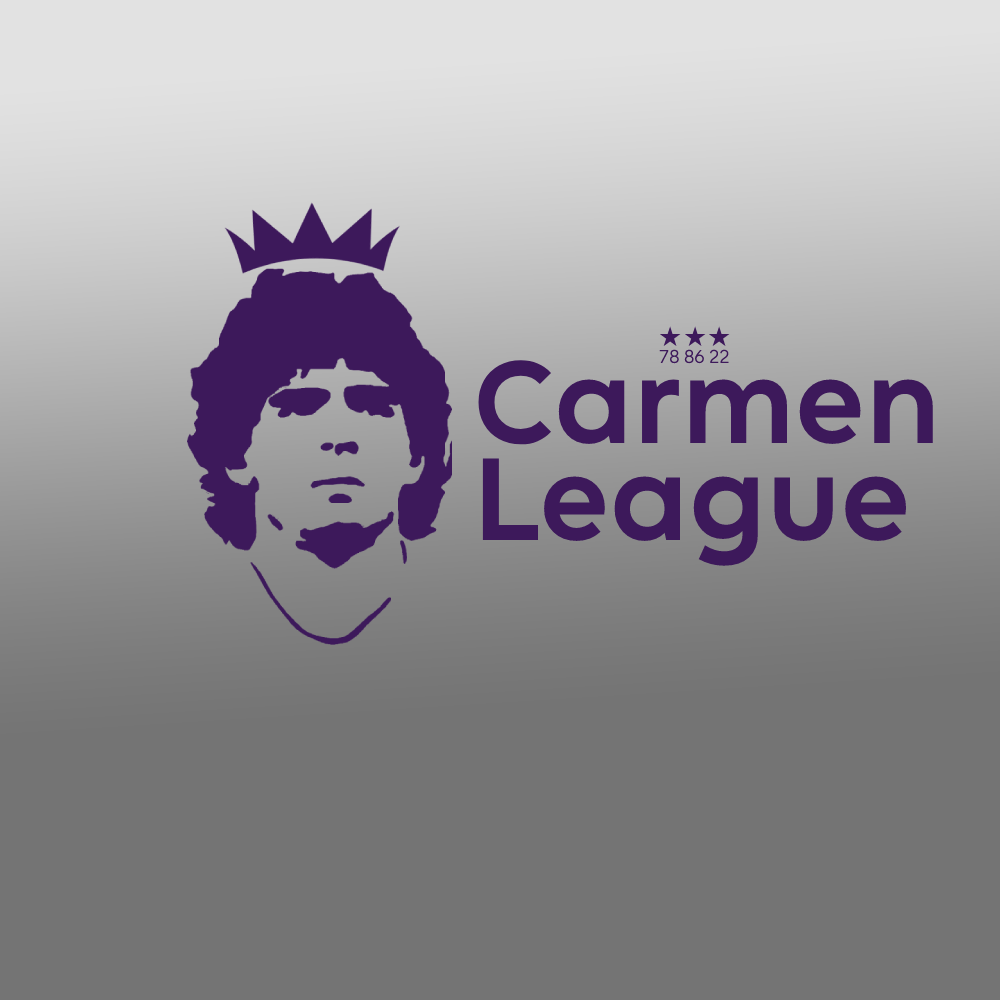
<style>
.page{position:relative;width:1000px;height:1000px;background:#747474}
.page>*{position:absolute;margin:0}
.t1{font:27px "DejaVuSans";color:#3d195b}
.t2{font:19px "PremierLeague-Regular";color:#3d195b}
.t3{font:118px/97px "PremierLeague-Bold";color:#3d195b}
</style>
<div class="page">
<p class="t1" style="left:660px;top:326px;width:21px;height:20px">★</p>
<p class="t1" style="left:685px;top:326px;width:21px;height:20px">★</p>
<p class="t1" style="left:709px;top:326px;width:21px;height:20px">★</p>
<p class="t2" style="left:659px;top:349px;width:70px;height:15px">78 86 22</p>
<p class="t3" style="left:478px;top:360px;width:455px;height:206px">Carmen<br>League</p>
</div>
